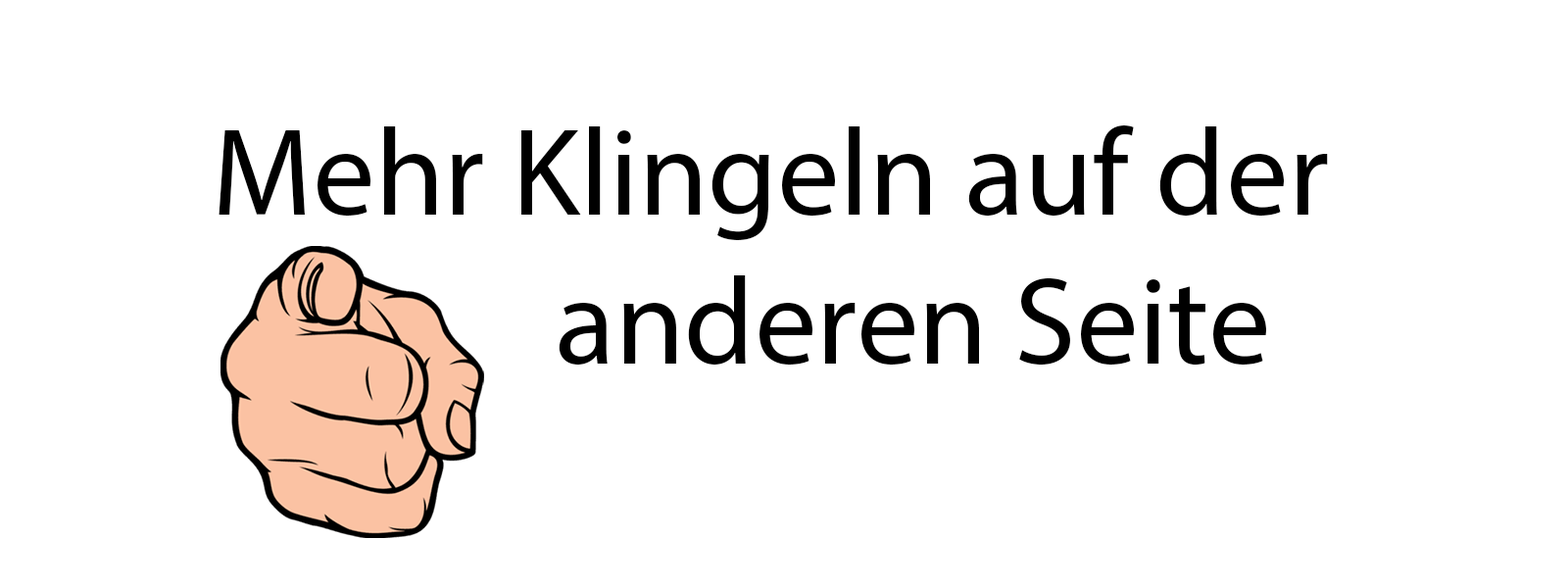
<style>
.page{position:relative;width:1568px;height:588px;background:#ffffff}
.page>*{position:absolute;margin:0}
.t1{font:124.5px "MyriadPro-Regular";color:#000000}
</style>
<div class="page">
<p class="t1" style="left:219px;top:125px;width:1109px;height:241px">Mehr Klingeln auf der <br>             anderen Seite</p>
</div>
